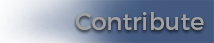
<style>
.page{position:relative;width:214px;height:43px}
.page>*{position:absolute;margin:0}
.t1{font:24px "Montserrat-Regular";color:#a1a1a1}
</style>
<div class="page">
<p class="t1" style="left:76px;top:12px;width:128px;height:18px">Contribute</p>
</div>
